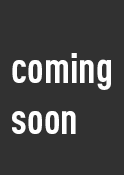
<style>
.page{position:relative;width:124px;height:175px;background:#313131}
.page>*{position:absolute;margin:0}
.t1{font:42.3px "DINPro-CondBold";color:#ffffff}
</style>
<div class="page">
<p class="t1" style="left:12px;top:53px;width:99px;height:81px">coming <br>soon</p>
</div>
